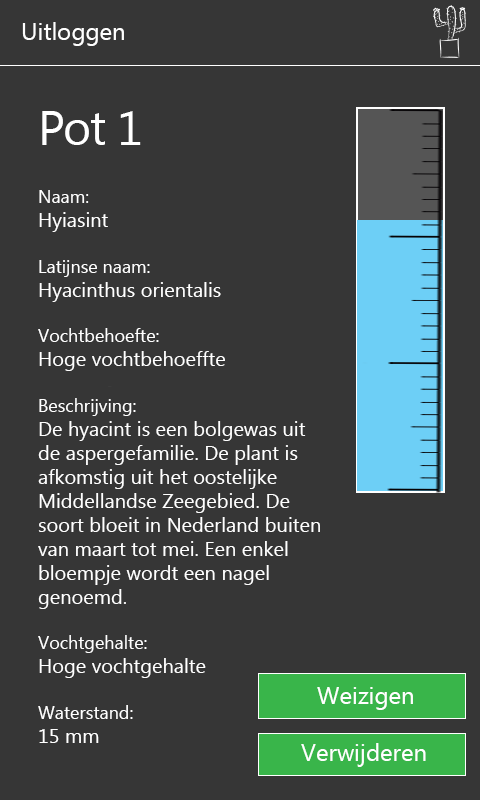
<style>
.page{position:relative;width:480px;height:800px;background:#363636}
.page>*{position:absolute;margin:0}
.t1{font:24px "MyanmarText";color:#ffffff}
.t2{font:48px "MyanmarText";letter-spacing:-0.025em;color:#ffffff}
.t3{font:20px "MyanmarText";color:#ffffff}
.t4{font:18px "MyanmarText";color:#ffffff}
</style>
<div class="page">
<p class="t1" style="left:22px;top:22px;width:102px;height:24px">Uitloggen</p>
<p class="t2" style="left:42px;top:111px;width:99px;height:34px">Pot 1</p>
<p class="t3" style="left:38px;top:190px;width:282px;height:553px"><span class="t4">Naam:<br></span>Hyiasint<br><br><span class="t4">Latijnse naam:<br></span>Hyacinthus orientalis<br><br><span class="t4">Vochtbehoefte:<br></span>Hoge vochtbehoeffte<br><br><span class="t4">Beschrijving:<br></span>De hyacint is een bolgewas uit <br>de aspergefamilie. De plant is <br>afkomstig uit het oostelijke <br>Middellandse Zeegebied. De <br>soort bloeit in Nederland buiten <br>van maart tot mei. Een enkel <br>bloempje wordt een nagel <br>genoemd.<br><br><span class="t4">Vochtgehalte:<br></span>Hoge vochtgehalte<br><br><span class="t4">Waterstand:<br></span>15 mm</p>
<p class="t1" style="left:317px;top:687px;width:96px;height:23px">Weizigen</p>
<p class="t1" style="left:301px;top:743px;width:125px;height:24px">Verwijderen</p>
</div>
